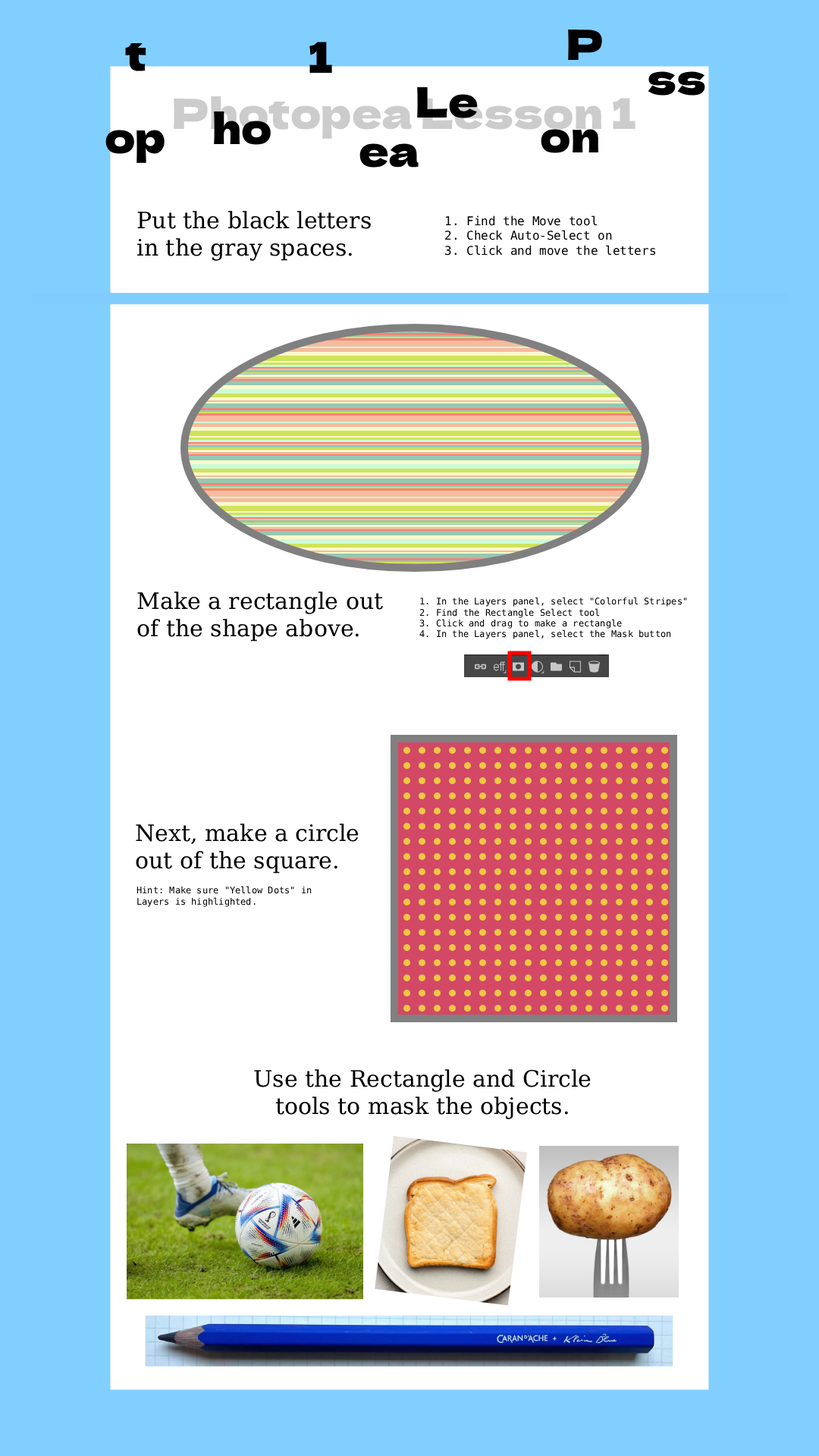
<style>
.page{position:relative;width:819px;height:1456px;background:#ffffff}
.page>*{position:absolute;margin:0}
.t1{font:22.7px "DejaVuSerif";color:#000000}
.t2{font:12.1px "DejaVuSansMono";color:#000000}
.t3{font:9.1px "DejaVuSansMono";color:#000000}
</style>
<div class="page">
<p class="t1" style="left:137px;top:211px;width:234px;height:50px">Put the black letters in the gray spaces.</p>
<p class="t2" style="left:445px;top:215px;width:211px;height:41px">1. Find the Move tool<br>2. Check Auto-Select on<br>3. Click and move the letters</p>
<p class="t1" style="left:137px;top:591px;width:246px;height:51px">Make a rectangle out of the shape above.</p>
<p class="t3" style="left:419px;top:597px;width:268px;height:42px">1. In the Layers panel, select "Colorful Stripes"<br>2. Find the Rectangle Select tool <br>3. Click and drag to make a rectangle<br>4. In the Layers panel, select the Mask button</p>
<p class="t1" style="left:136px;top:824px;width:223px;height:50px">Next, make a circle out of the square.</p>
<p class="t3" style="left:136px;top:886px;width:176px;height:21px">Hint: Make sure "Yellow Dots" in Layers is highlighted.</p>
<p class="t1" style="left:254px;top:1069px;width:337px;height:50px;text-align:center">Use the Rectangle and Circle tools to mask the objects.</p>
</div>
